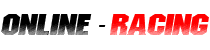
<style>
.page{position:relative;width:210px;height:50px;background:#ffffff}
.page>*{position:absolute;margin:0}
.t1{font:26px "InvisibleKiller";letter-spacing:0.02em;color:#000000;text-transform:uppercase;font-style:italic;scale:0.91 1}
.t2{font:26px "MyriadPro-Regular";letter-spacing:0.02em;color:#000000;text-transform:uppercase;font-style:italic;scale:0.91 1}
.t3{font:26px "InvisibleKiller";letter-spacing:0.02em;color:#ff0000;text-transform:uppercase;font-style:italic;scale:0.91 1}
</style>
<div class="page">
<p class="t1" style="left:1px;top:14px;width:208px;height:21px">ONLINE <span class="t2">- </span><span class="t3">racing</span></p>
</div>
